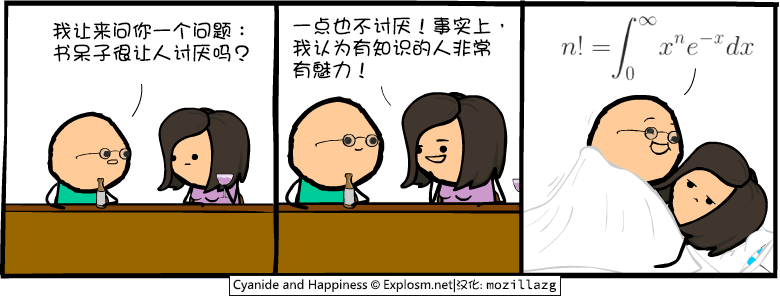
<style>
.page{position:relative;width:780px;height:300px;background:#ffffff}
.page>*{position:absolute;margin:0}
.t1{font:20px/22px "DFGirl";color:#000000}
</style>
<div class="page">
<p class="t1" style="left:292px;top:17px;width:212px;height:62px">一点也不讨厌！事实上，<br>我认为有知识的人非常<br>有魅力！</p>
<p class="t1" style="left:52px;top:21px;width:197px;height:41px">我让来问你一个问题：<br>书呆子很让人讨厌吗？</p>
</div>
